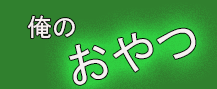
<style>
.page{position:relative;width:217px;height:89px;background:#30802e}
.page>*{position:absolute;margin:0}
.t1{font:25px "MS-Gothic";color:#f6f0f0}
.t2{font:45.8px "MS-Gothic";color:#f6f0f0}
</style>
<div class="page">
<p class="t1" style="left:27px;top:15px;width:48px;height:24px">俺の</p>
<p class="t2" style="left:69px;top:28px;width:127px;height:57px;rotate:-13deg">おやつ</p>
</div>
